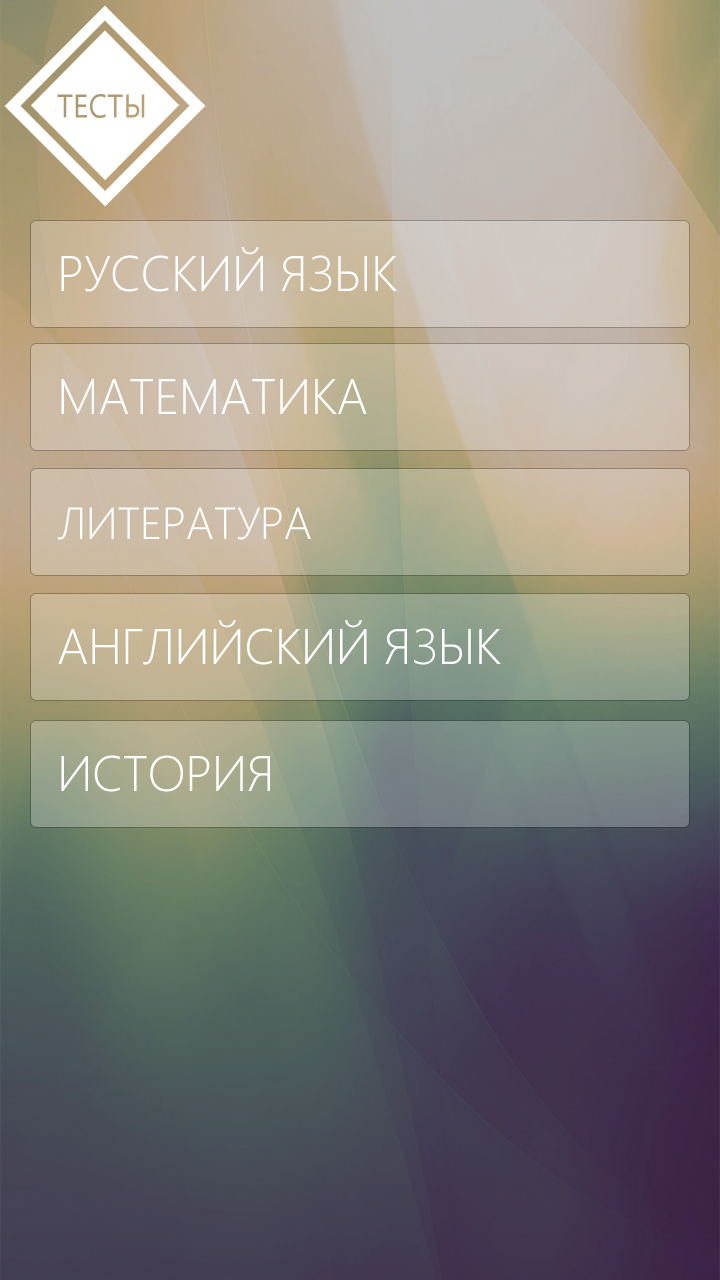
<style>
.page{position:relative;width:720px;height:1280px}
.page>*{position:absolute;margin:0}
.t1{font:50px "SegoeUI-Light";letter-spacing:-0.01em;color:#ffffff}
.t2{font:45px "SegoeUI-Light";letter-spacing:-0.01em;color:#ffffff}
</style>
<div class="page">
<p class="t1" style="left:61px;top:247px;width:336px;height:45px">РУССКИЙ ЯЗЫК</p>
<p class="t1" style="left:61px;top:379px;width:306px;height:35px">МАТЕМАТИКА</p>
<p class="t2" style="left:57px;top:507px;width:254px;height:33px">ЛИТЕРАТУРА</p>
<p class="t1" style="left:58px;top:620px;width:443px;height:45px">АНГЛИЙСКИЙ ЯЗЫК</p>
<p class="t1" style="left:61px;top:755px;width:209px;height:37px">ИСТОРИЯ</p>
</div>
